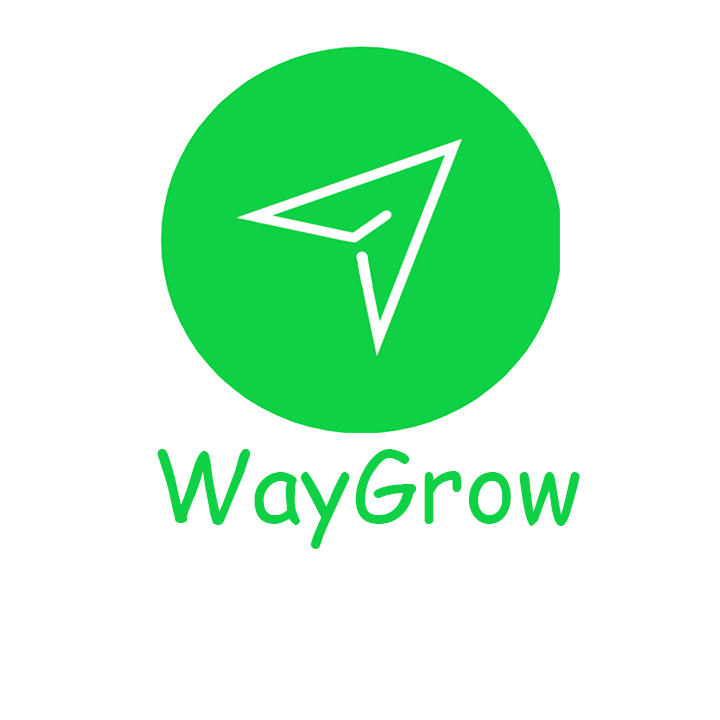
<style>
.page{position:relative;width:720px;height:720px;background:#ffffff}
.page>*{position:absolute;margin:0}
.t1{font:97.2px "ComicSansMS";color:#0ed145}
</style>
<div class="page">
<p class="t1" style="left:157px;top:449px;width:423px;height:100px">WayGrow</p>
</div>
